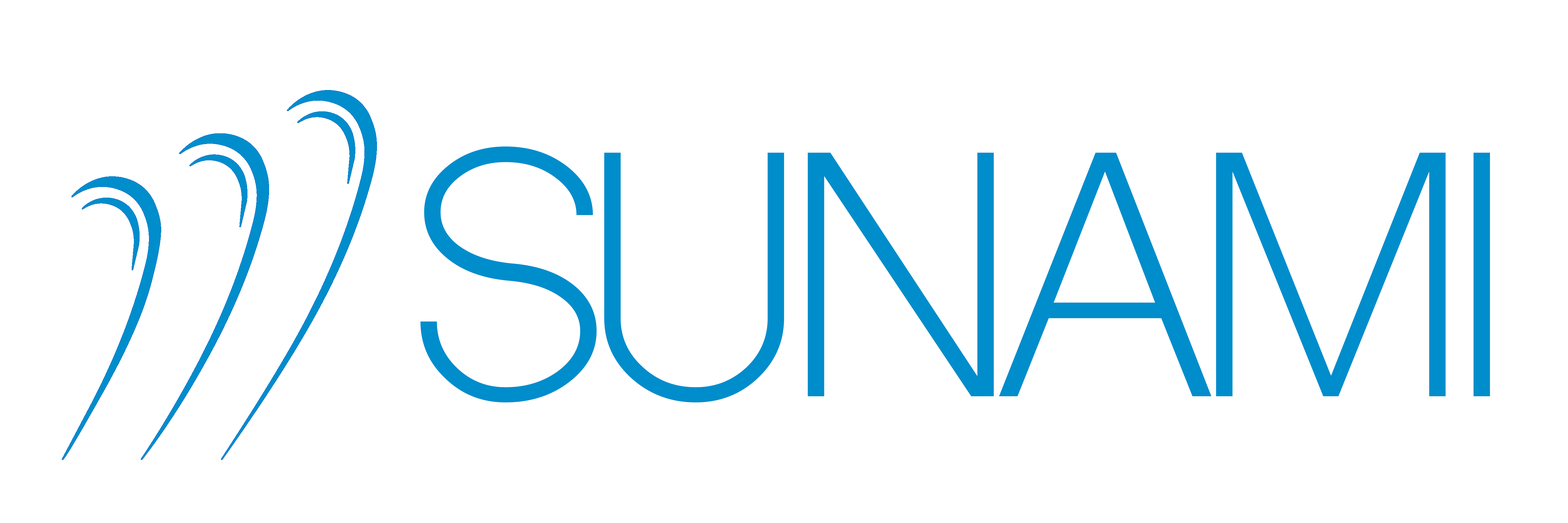
<style>
.page{position:relative;width:1568px;height:523px;background:#ffffff}
.page>*{position:absolute;margin:0}
.t1{font:330.6px "ShreeDev0714";letter-spacing:-0.075em;color:#008dcc}
</style>
<div class="page">
<p class="t1" style="left:420px;top:146px;width:1070px;height:256px">SUNAMI</p>
</div>
